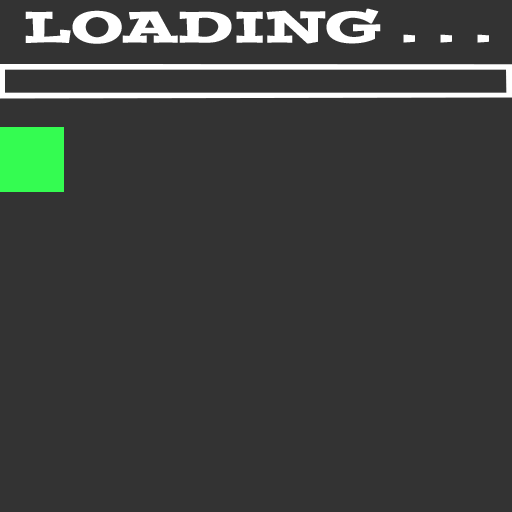
<style>
.page{position:relative;width:512px;height:512px;background:#333333}
.page>*{position:absolute;margin:0}
.t1{font:43.5px "PostinoStd";color:#ffffff;font-weight:bold;scale:1.2 1}
</style>
<div class="page">
<p class="t1" style="left:25px;top:8px;width:464px;height:36px">LOADING . . .</p>
</div>
